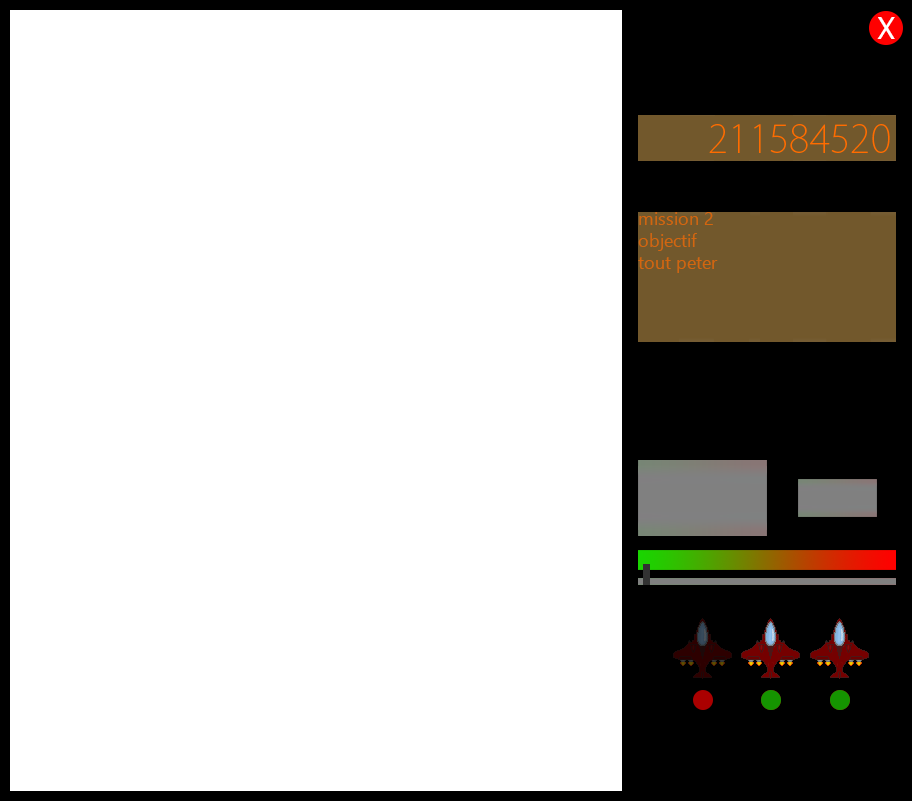
<style>
.page{position:relative;width:912px;height:801px;background:#ffffff}
.page>*{position:absolute;margin:0}
.t1{font:30px "Tahoma";color:#ffffff}
.t2{font:18px "LeelawadeeUI";color:#d3660e}
</style>
<div class="page">
<p class="t1" style="left:877px;top:17px;width:18px;height:22px">X</p>
<p class="t2" style="left:638px;top:212px;width:80px;height:61px;text-align:right">mission 2<br>objectif<br>tout peter</p>
</div>
